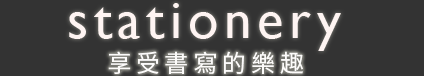
<style>
.page{position:relative;width:424px;height:76px;background:#333333}
.page>*{position:absolute;margin:0}
.t1{font:55px "GillSansMT";letter-spacing:0.1em;color:#fef4f2}
.t2{font:24px "NotoSansCJKtc-Regular";letter-spacing:0.2em;color:#fcfbfa}
</style>
<div class="page">
<p class="t1" style="left:69px;top:3px;width:272px;height:48px">stationery</p>
<p class="t2" style="left:108px;top:51px;width:195px;height:23px">享受書寫的樂趣</p>
</div>
